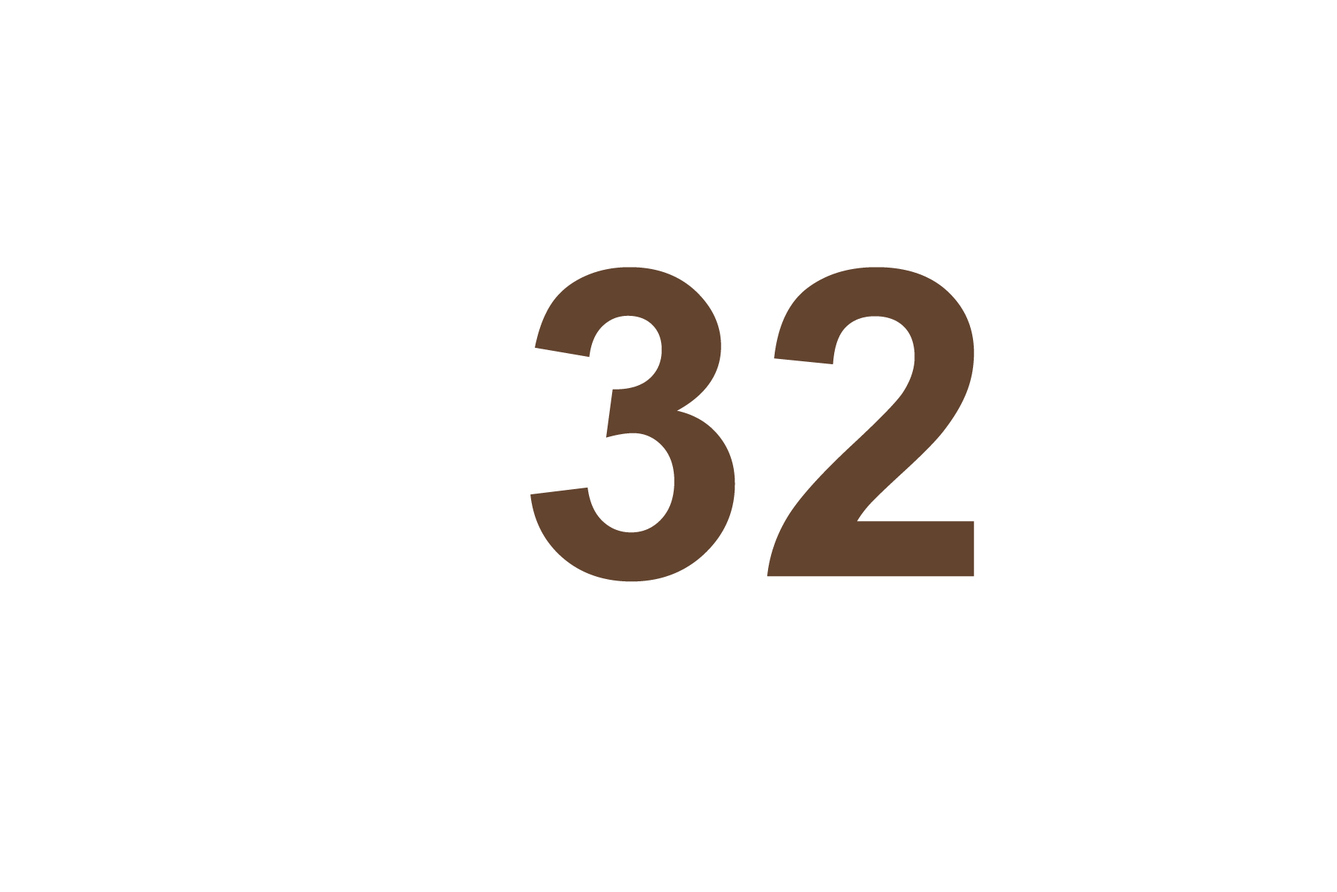
<style>
.page{position:relative;width:1337px;height:892px;background:#ffffff}
.page>*{position:absolute;margin:0}
.t1{font:429.6px "Arial-BoldMT";color:#63442f}
</style>
<div class="page">
<p class="t1" style="left:531px;top:267px;width:444px;height:315px">32</p>
</div>
